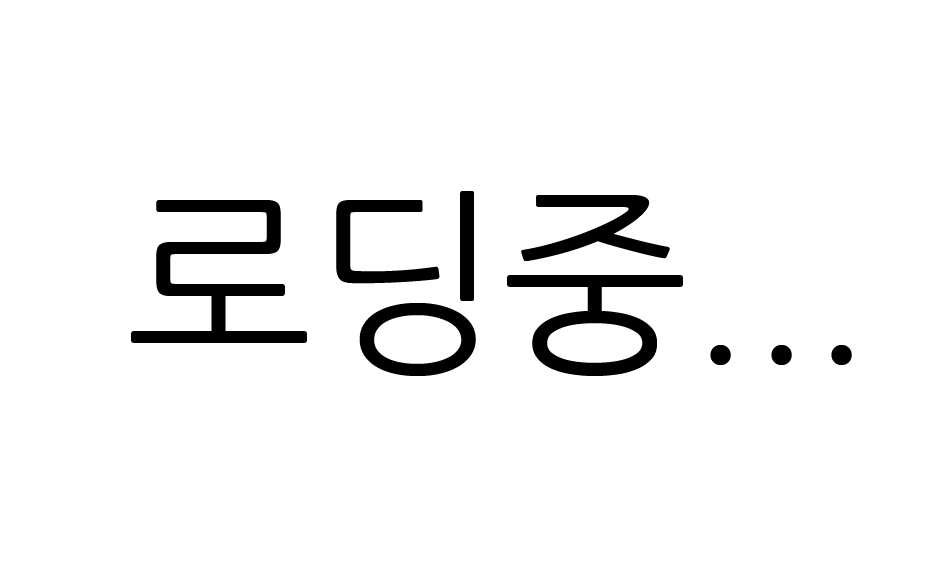
<style>
.page{position:relative;width:944px;height:585px;background:#ffffff}
.page>*{position:absolute;margin:0}
.t1{font:200px "NanumGothic";color:#000000}
</style>
<div class="page">
<p class="t1" style="left:131px;top:191px;width:721px;height:185px">로딩중...</p>
</div>
